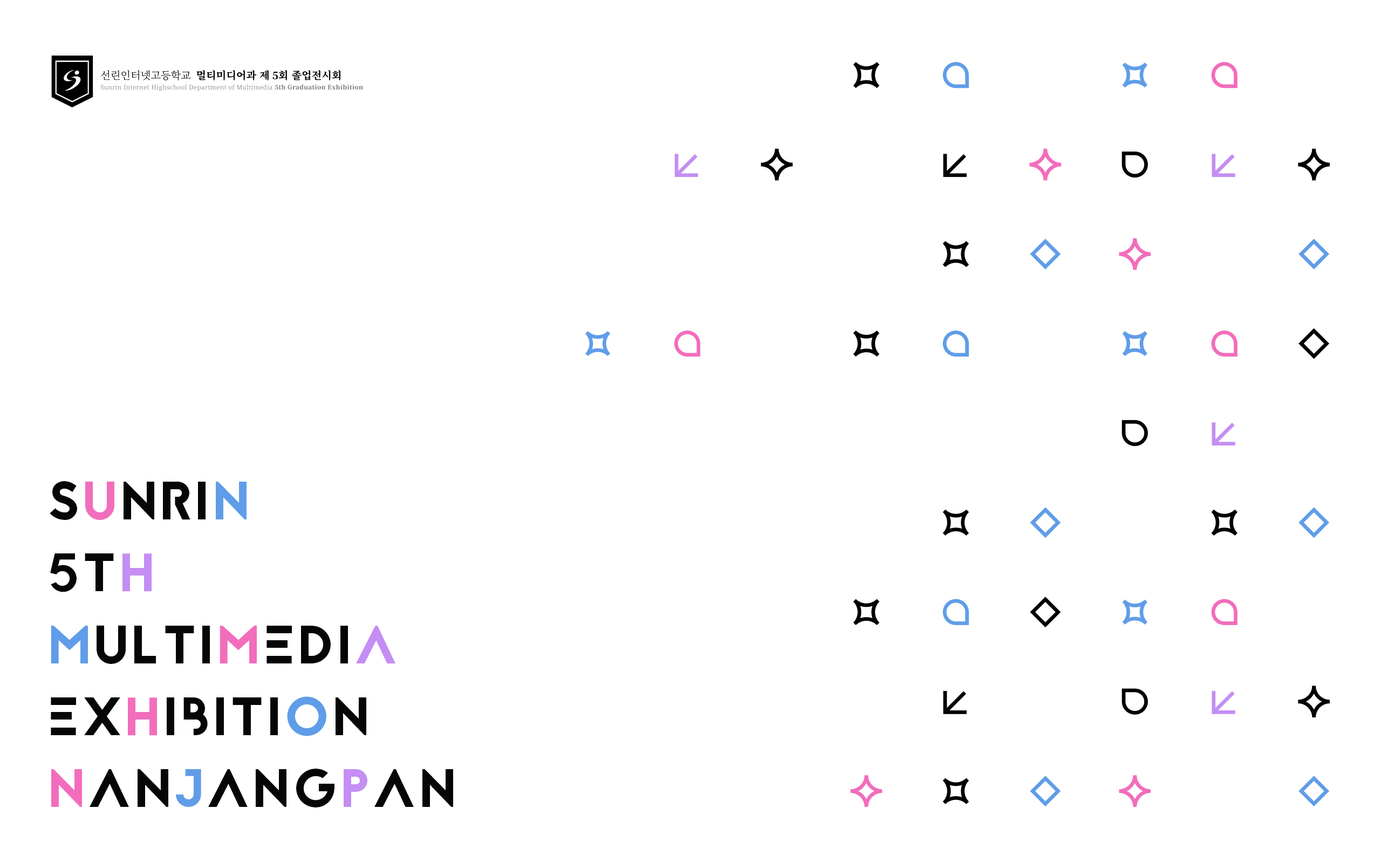
<style>
.page{position:relative;width:1381px;height:863px;background:#ffffff}
.page>*{position:absolute;margin:0}
.t1{font:54px/71.9px "Jaapokkisubtract-Regular";letter-spacing:0.05em;color:#050607}
.t2{font:54px/71.9px "Jaapokkisubtract-Regular";letter-spacing:0.05em;color:#e571ac}
.t3{font:54px/71.9px "Jaapokkisubtract-Regular";letter-spacing:0.05em;color:#f26dbc}
.t4{font:54px/71.9px "Jaapokkisubtract-Regular";letter-spacing:0.05em;color:#609de8}
.t5{font:54px/71.9px "Jaapokkisubtract-Regular";letter-spacing:0.05em;color:#c48ef4}
</style>
<div class="page">
<p class="t1" style="left:50px;top:481px;width:403px;height:327px"><span class="t2"><br></span>S<span class="t3">U</span>NRI<span class="t4">N</span> <br>5T<span class="t5">H <br></span><span class="t4">M</span>ULTI<span class="t3">M</span>EDI<span class="t5">A</span> <br>EX<span class="t3">H</span>IBITI<span class="t4">O</span>N<br><span class="t3">N</span>AN<span class="t4">J</span>ANG<span class="t5">P</span>AN</p>
</div>
